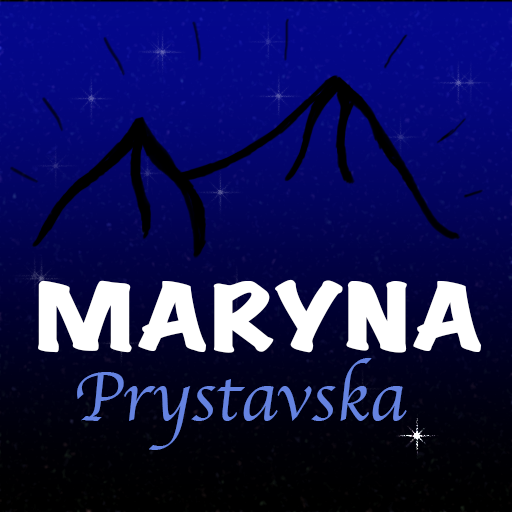
<style>
.page{position:relative;width:512px;height:512px}
.page>*{position:absolute;margin:0}
.t1{font:83.4px "MarkerFelt-Wide";color:#ffffff;scale:1.26 1}
.t2{font:72px "Apple-Chancery";color:#6583e1}
</style>
<div class="page">
<p class="t1" style="left:38px;top:279px;width:444px;height:74px">MARYNA</p>
<p class="t2" style="left:77px;top:358px;width:330px;height:92px">Prystavska</p>
</div>
